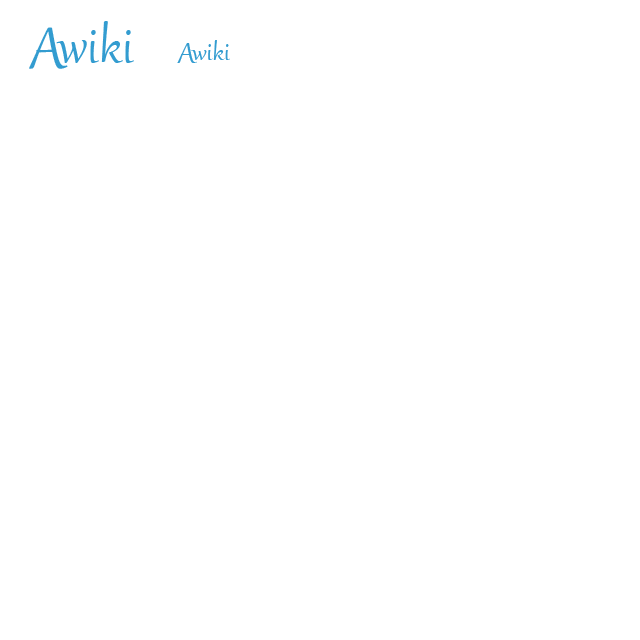
<style>
.page{position:relative;width:640px;height:640px;background:#ffffff}
.page>*{position:absolute;margin:0}
.t1{font:72px "Gabriola";color:#339cd0}
.t2{font:60px "Gabriola";color:#339cd0}
.t3{font:30px "Gabriola";color:#339cd0}
.t4{font:36px "Gabriola";color:#339cd0}
</style>
<div class="page">
<p class="t1" style="left:29px;top:27px;width:39px;height:42px">A</p>
<p class="t2" style="left:56px;top:21px;width:78px;height:42px">wiki</p>
<p class="t3" style="left:191px;top:40px;width:39px;height:20px">wiki</p>
<p class="t4" style="left:177px;top:43px;width:20px;height:20px">A</p>
</div>
